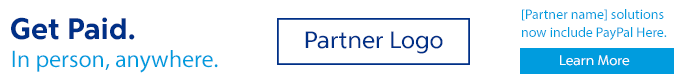
<style>
.page{position:relative;width:695px;height:80px;background:#ffffff}
.page>*{position:absolute;margin:0}
.t1{font:30px "PayPalForward-Bold";color:#003087}
.t2{font:14px/24.3px "MyriadPro-Regular";color:#009cde}
.t3{font:24px "PayPalForward-Regular";color:#003087}
.t4{font:24px "MyriadPro-Regular";color:#009cde}
.t5{font:14px "PayPalForward-Regular";color:#ffffff}
</style>
<div class="page">
<p class="t1" style="left:11px;top:17px;width:124px;height:23px">Get Paid.</p>
<p class="t2" style="left:522px;top:9px;width:145px;height:31px">[Partner name] solutions <br>now include PayPal Here.</p>
<p class="t3" style="left:305px;top:31px;width:138px;height:23px">Partner Logo</p>
<p class="t4" style="left:12px;top:50px;width:206px;height:23px">In person, anywhere.</p>
<p class="t5" style="left:560px;top:55px;width:70px;height:11px">Learn More</p>
</div>
